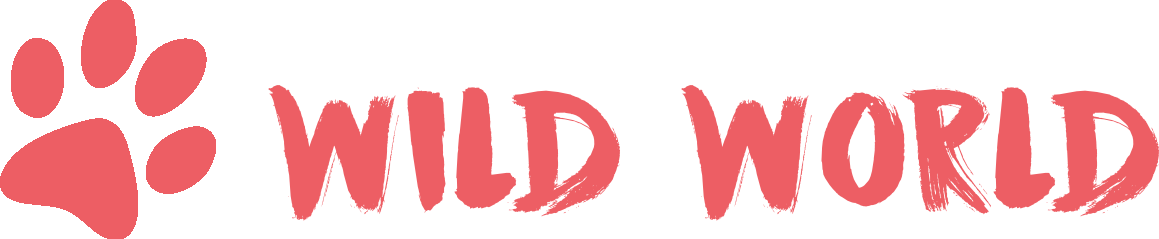
<style>
.page{position:relative;width:1159px;height:239px;background:#ffffff}
.page>*{position:absolute;margin:0}
.t1{font:150px "DKCinnabarBrush";color:#ed5e64}
</style>
<div class="page">
<p class="t1" style="left:268px;top:85px;width:891px;height:136px">Wild World</p>
</div>
